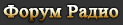
<style>
.page{position:relative;width:123px;height:25px;background:#333333}
.page>*{position:absolute;margin:0}
.t1{font:19px "TimesNewRomanPSMT";letter-spacing:0.01em;font-weight:bold}
</style>
<div class="page">
<p class="t1" style="left:3px;top:5px;width:116px;height:17px">Форум Радио</p>
</div>
